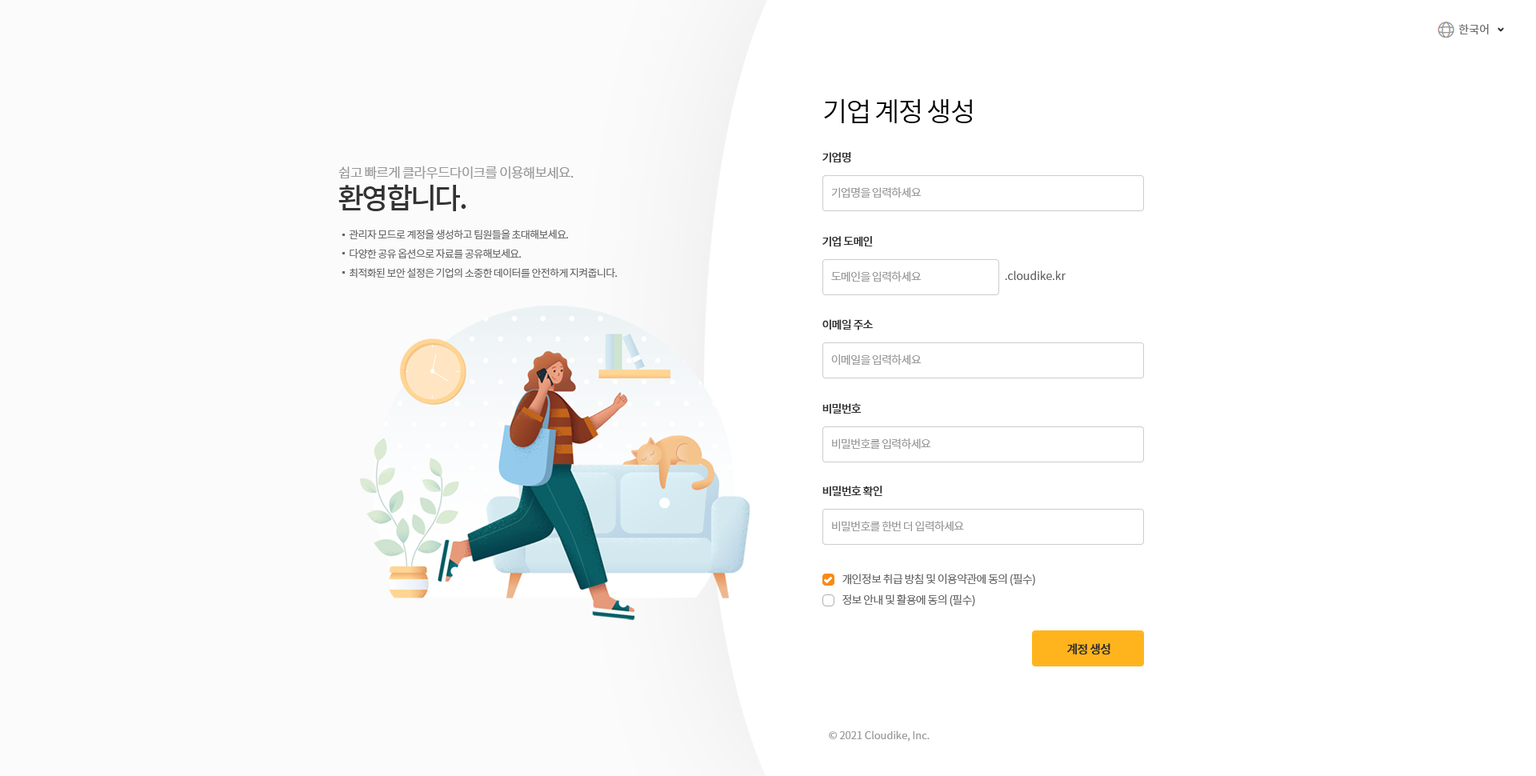
<style>
.page{position:relative;width:1536px;height:776px;background:#ffffff}
.page>*{position:absolute;margin:0}
.t1{font:11.2px "NotoSansCJKkr-DemiLight";color:#666666}
.t2{font:27.2px "NotoSansCJKkr-DemiLight";letter-spacing:-0.05em;color:#000000}
.t3{font:11.2px "NotoSansCJKkr-Medium";letter-spacing:-0.05em;color:#333333}
.t4{font:13.6px "NotoSansCJKkr-DemiLight";letter-spacing:-0.05em;color:#999999}
.t5{font:28.8px "NotoSansCJKkr-Medium";letter-spacing:-0.075em;color:#333333}
.t6{font:11.2px "NotoSansCJKkr-DemiLight";letter-spacing:-0.05em;color:#999999}
.t7{font:10.4px/19.2px "NotoSansCJKkr-DemiLight";letter-spacing:-0.05em;color:#666666}
.t8{font:11.2px "NotoSansCJKkr-DemiLight";letter-spacing:-0.05em;color:#666666}
.t9{font:12px "NotoSansCJKkr-Medium";letter-spacing:-0.05em;color:#2d2d2d}
.t10{font:10.4px "NotoSansCJKkr-DemiLight";color:#999999}
</style>
<div class="page">
<p class="t1" style="left:1459px;top:24px;width:30px;height:11px">한국어</p>
<p class="t2" style="left:824px;top:98px;width:148px;height:26px">기업 계정 생성</p>
<p class="t3" style="left:823px;top:152px;width:28px;height:11px">기업명</p>
<p class="t4" style="left:338px;top:166px;width:236px;height:13px">쉽고 빠르게 클라우드다이크를 이용해보세요.</p>
<p class="t5" style="left:338px;top:184px;width:128px;height:27px">환영합니다.</p>
<p class="t6" style="left:831px;top:187px;width:91px;height:11px">기업명을 입력하세요</p>
<p class="t7" style="left:349px;top:230px;width:269px;height:48px">관리자 모드로 계정을 생성하고 팀원들을 초대해보세요.<br>다양한 공유 옵션으로 자료를 공유해보세요.<br>최적화된 보안 설정은 기업의 소중한 데이터를 안전하게 지켜줍니다.</p>
<p class="t3" style="left:823px;top:236px;width:50px;height:11px">기업 도메인</p>
<p class="t6" style="left:831px;top:271px;width:91px;height:11px">도메인을 입력하세요</p>
<p class="t1" style="left:1005px;top:270px;width:61px;height:10px">.cloudike.kr</p>
<p class="t3" style="left:823px;top:319px;width:50px;height:11px">이메일 주소</p>
<p class="t6" style="left:831px;top:354px;width:91px;height:12px">이메일을 입력하세요</p>
<p class="t3" style="left:823px;top:403px;width:39px;height:11px">비밀번호</p>
<p class="t6" style="left:832px;top:438px;width:99px;height:12px">비밀번호를 입력하세요</p>
<p class="t3" style="left:823px;top:486px;width:60px;height:11px">비밀번호 확인</p>
<p class="t6" style="left:832px;top:521px;width:132px;height:11px">비밀번호를 한번 더 입력하세요</p>
<p class="t8" style="left:843px;top:574px;width:192px;height:12px">개인정보 취급 방침 및 이용약관에 동의 (필수)</p>
<p class="t8" style="left:843px;top:595px;width:132px;height:12px">정보 안내 및 활용에 동의 (필수)</p>
<p class="t9" style="left:1067px;top:643px;width:44px;height:12px">계정 생성</p>
<p class="t10" style="left:829px;top:731px;width:101px;height:11px">© 2021 Cloudike, Inc.</p>
</div>
